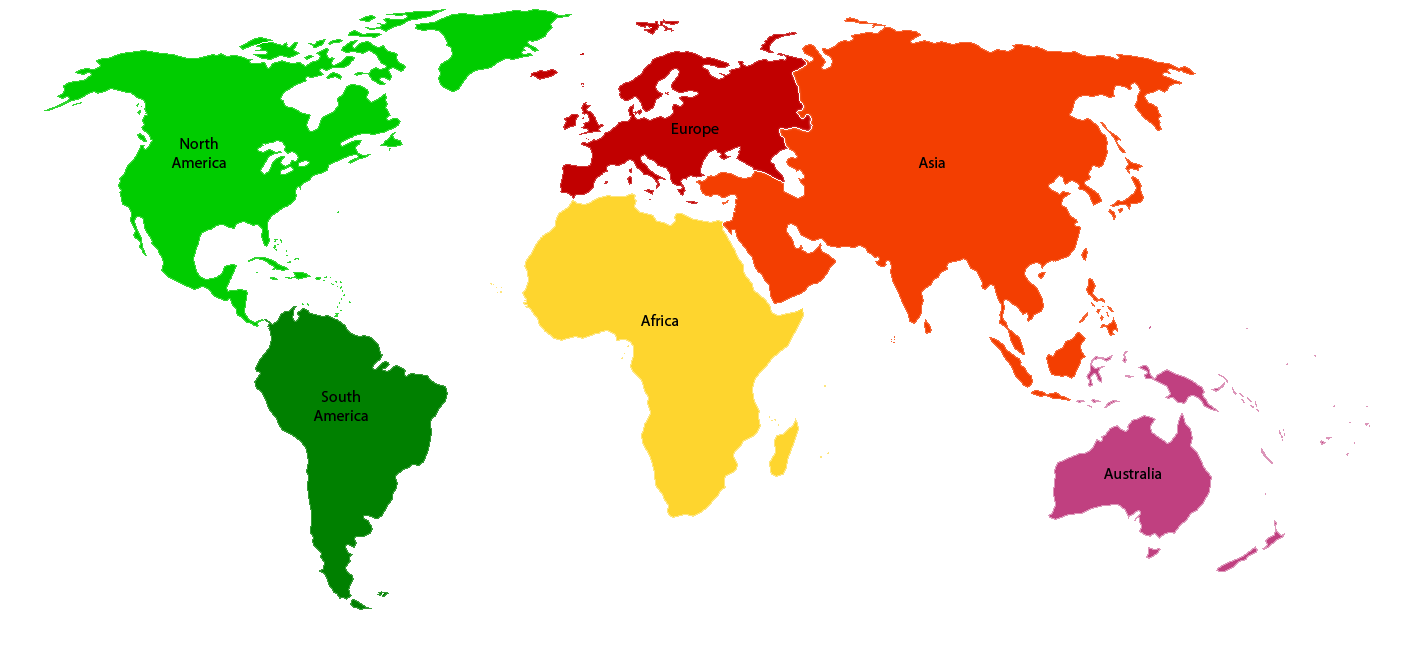
<style>
.page{position:relative;width:1420px;height:655px;background:#ffffff}
.page>*{position:absolute;margin:0}
.t1{font:16px "MyriadPro-Regular";color:#000000}
</style>
<div class="page">
<p class="t1" style="left:672px;top:123px;width:47px;height:14px">Europe</p>
<p class="t1" style="left:171px;top:137px;width:55px;height:31px;text-align:center">North<br>America</p>
<p class="t1" style="left:918px;top:157px;width:27px;height:11px">Asia</p>
<p class="t1" style="left:641px;top:314px;width:38px;height:12px">Africa</p>
<p class="t1" style="left:313px;top:390px;width:55px;height:31px;text-align:center">South<br>America</p>
<p class="t1" style="left:1104px;top:467px;width:58px;height:12px">Australia</p>
</div>
